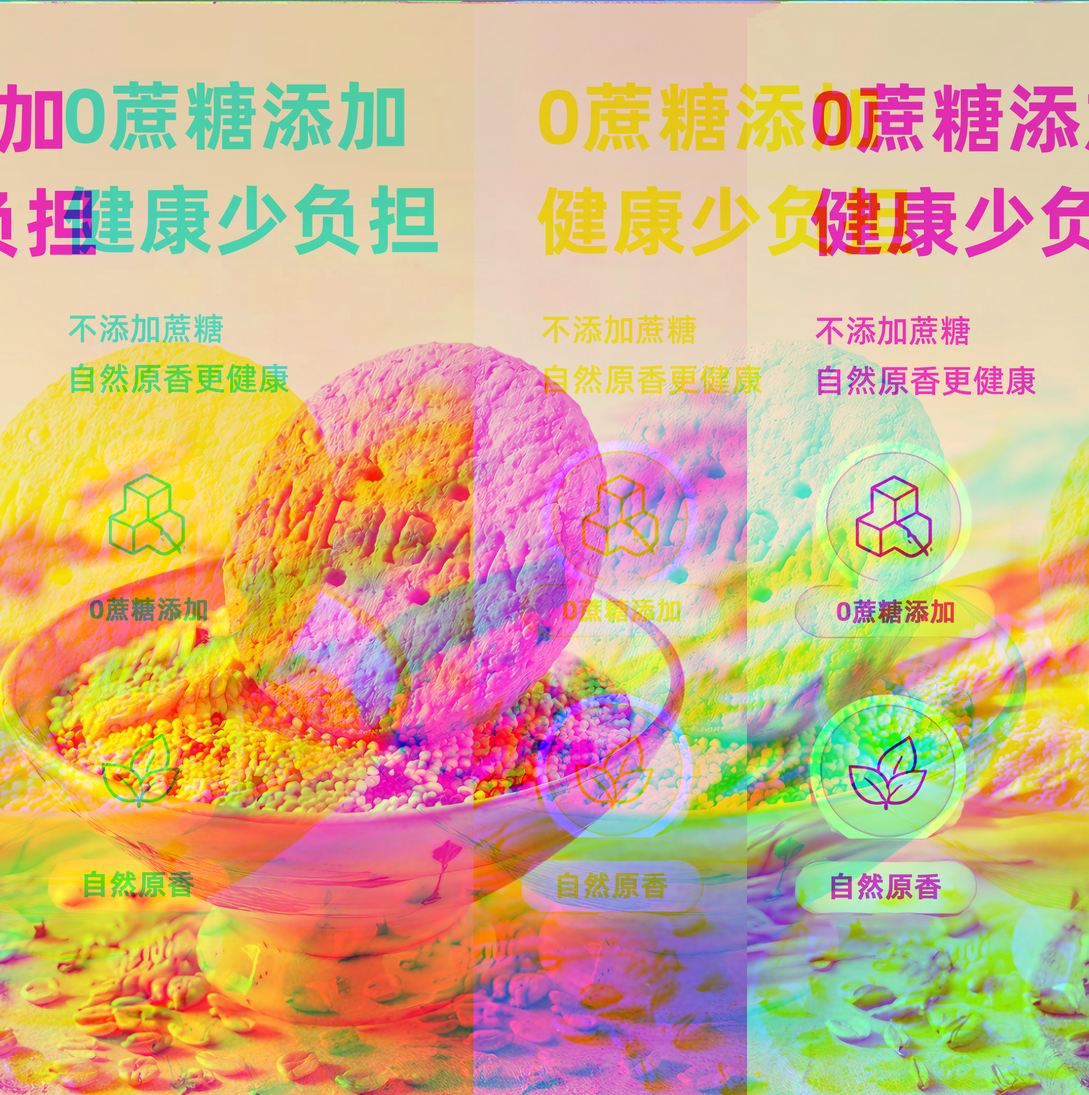
<style>
.page{position:relative;width:1089px;height:1095px}
.page>*{position:absolute;margin:0}
.t1{font:77.1px "AlibabaPuHuiTi-Bold";color:#49cea9}
.t2{font:77.1px "AlibabaPuHuiTi-Bold";color:#48d1af}
.t3{font:32.1px "AlibabaPuHuiTi-Medium";color:#4ed6b8}
.t4{font:32.5px "AlibabaPuHuiTi-Medium"}
.t5{font:25.8px "AlibabaPuHuiTi-Medium";font-weight:bold}
.t6{font:28.5px "AlibabaPuHuiTi-Medium";font-weight:bold}
</style>
<div class="page">
<p class="t1" style="left:66px;top:80px;width:339px;height:70px">0蔗糖添加</p>
<p class="t2" style="left:63px;top:182px;width:375px;height:72px">健康少负担</p>
<p class="t3" style="left:68px;top:312px;width:155px;height:30px">不添加蔗糖</p>
<p class="t4" style="left:71px;top:362px;width:218px;height:31px">自然原香更健康</p>
<p class="t5" style="left:90px;top:596px;width:117px;height:24px">0蔗糖添加</p>
<p class="t6" style="left:84px;top:869px;width:111px;height:27px">自然原香</p>
</div>
